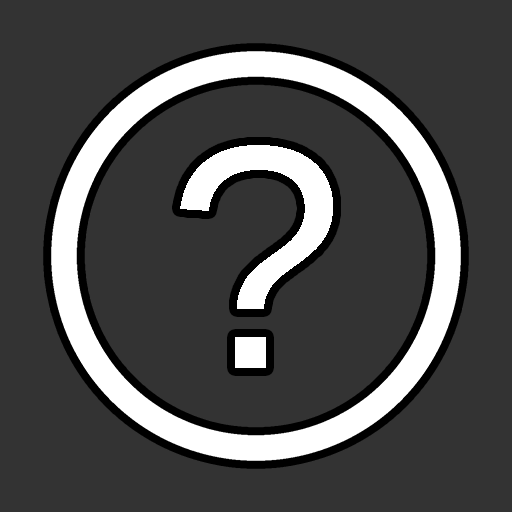
<style>
.page{position:relative;width:512px;height:512px;background:#333333}
.page>*{position:absolute;margin:0}
.t1{font:320px "LiberationSans";color:#ffffff}
</style>
<div class="page">
<p class="t1" style="left:180px;top:145px;width:153px;height:223px">?</p>
</div>
